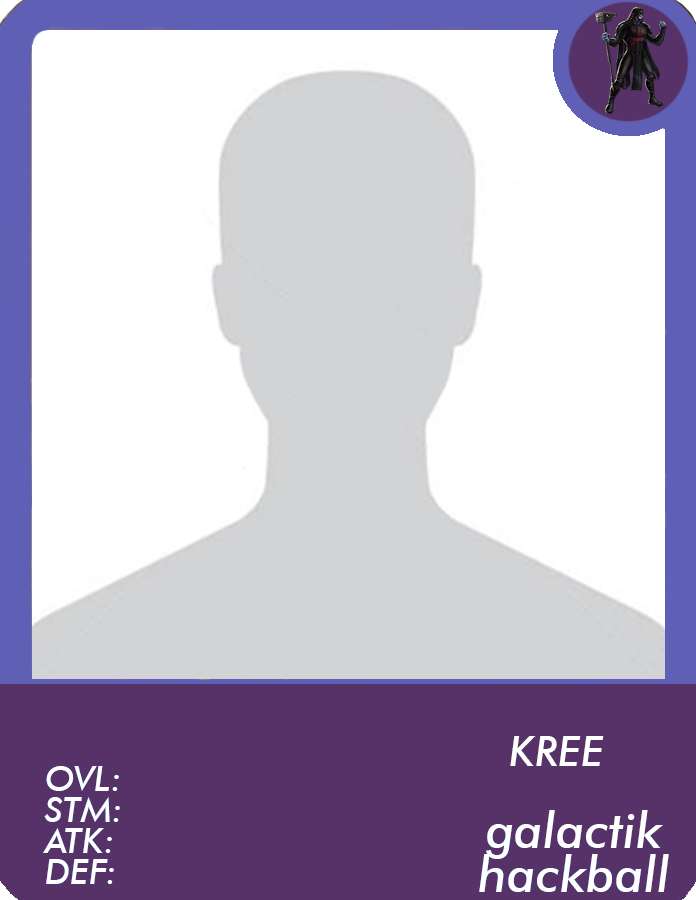
<style>
.page{position:relative;width:696px;height:900px;background:#ffffff}
.page>*{position:absolute;margin:0}
.t1{font:42px "FuturaBT-MediumItalic";color:#ffffff}
.t2{font:35px/31px "FuturaBT-MediumItalic";color:#ffffff}
.t3{font:50.3px/44.7px "FuturaBT-MediumItalic";color:#ffffff}
</style>
<div class="page">
<p class="t1" style="left:510px;top:736px;width:94px;height:30px">KREE</p>
<p class="t2" style="left:43px;top:766px;width:77px;height:118px">OVL:<br>STM:<br>ATK:<br>DEF:</p>
<p class="t3" style="left:479px;top:810px;width:190px;height:82px;text-align:center">galactik<br>hackball</p>
</div>
